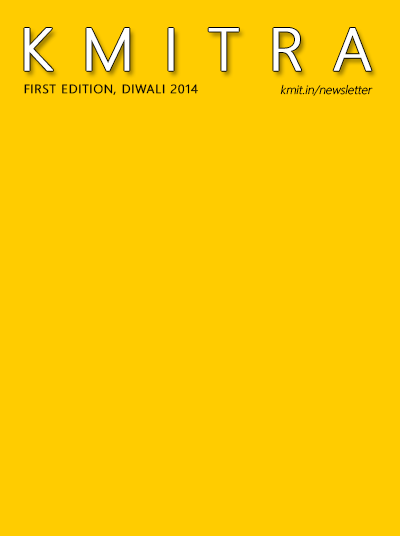
<style>
.page{position:relative;width:400px;height:536px;background:#ffcc00}
.page>*{position:absolute;margin:0}
.t1{font:60px "SegoeWP-Light";letter-spacing:0.445em;color:#ffffff;text-transform:uppercase;font-weight:bold;scale:1.04 1}
.t2{font:60px "SegoeWP-Light";color:#ffffff;text-transform:uppercase;font-weight:bold;scale:1.04 1}
.t3{font:12px "SegoeWP-Light";color:#000103;text-transform:uppercase;font-weight:bold;scale:1.04 1}
.t4{font:12px "SegoeWP-Light";color:#000103;font-style:italic;scale:1.04 1}
</style>
<div class="page">
<p class="t1" style="left:24px;top:28px;width:348px;height:43px">KMITR<span class="t2">A</span></p>
<p class="t3" style="left:24px;top:84px;width:174px;height:11px">First eDition, Diwali 2014</p>
<p class="t4" style="left:280px;top:84px;width:93px;height:12px">kmit.in/newsletter</p>
</div>
